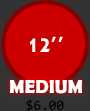
<style>
.page{position:relative;width:90px;height:111px;background:#cc0000}
.page>*{position:absolute;margin:0}
.t1{font:19px "BerlinSansFBDemi-Bold";color:#ffffff}
.t2{font:14px "Consolas";color:#000000}
</style>
<div class="page">
<p class="t1" style="left:10px;top:80px;width:72px;height:14px">MEDIUM</p>
<p class="t2" style="left:26px;top:99px;width:38px;height:13px">$6.00</p>
</div>
